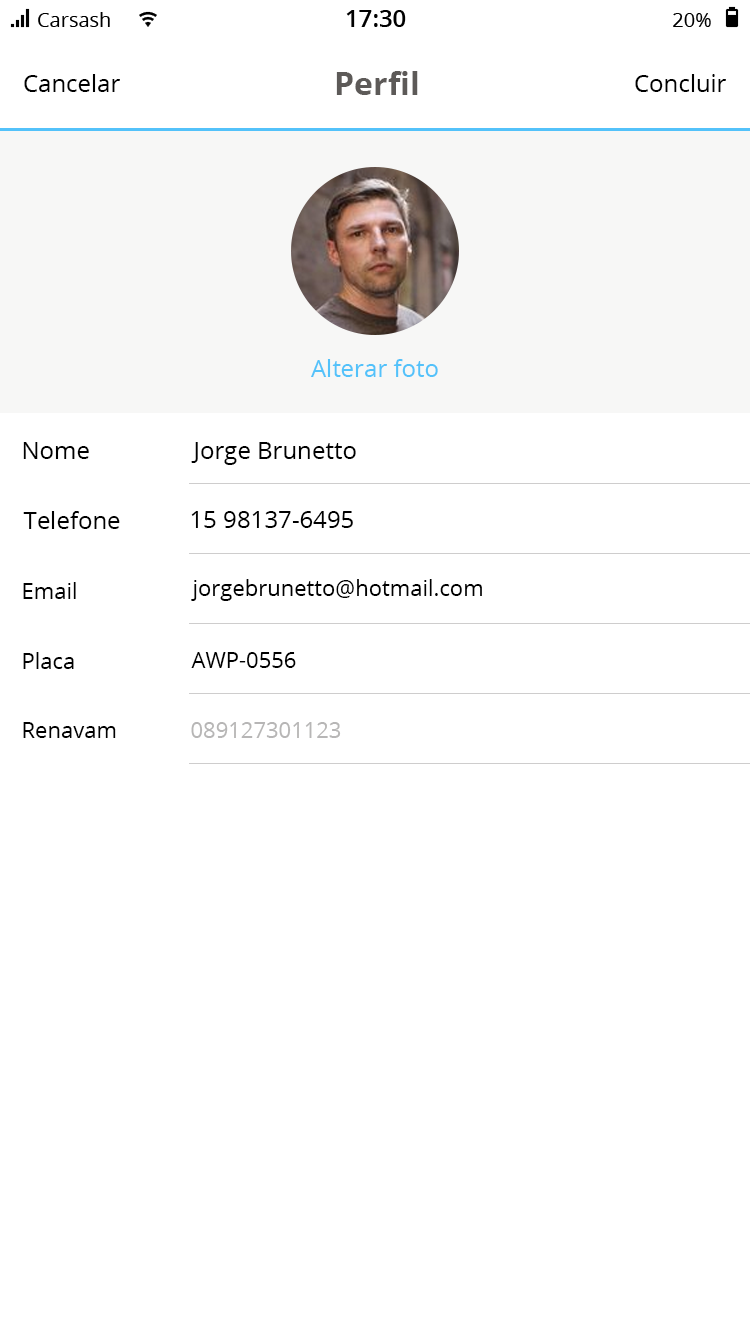
<style>
.page{position:relative;width:750px;height:1334px;background:#ffffff}
.page>*{position:absolute;margin:0}
.t1{font:24px "OpenSans";color:#000000}
.t2{font:32px "OpenSans-Bold";color:#5d5a58}
.t3{font:24px "OpenSans";color:#53c2fa}
.t4{font:22px "OpenSans";color:#000000}
.t5{font:22px "OpenSans";color:#b7b6b6}
</style>
<div class="page">
<p class="t1" style="left:24px;top:74px;width:96px;height:18px">Cancelar</p>
<p class="t2" style="left:336px;top:71px;width:82px;height:24px">Perfil</p>
<p class="t1" style="left:635px;top:74px;width:91px;height:18px">Concluir</p>
<p class="t3" style="left:311px;top:359px;width:127px;height:18px">Alterar foto</p>
<p class="t1" style="left:23px;top:442px;width:66px;height:17px">Nome</p>
<p class="t1" style="left:191px;top:442px;width:165px;height:23px">Jorge Brunetto</p>
<p class="t1" style="left:23px;top:511px;width:97px;height:18px">Telefone</p>
<p class="t1" style="left:191px;top:511px;width:162px;height:17px">15 98137-6495</p>
<p class="t4" style="left:23px;top:582px;width:53px;height:17px">Email</p>
<p class="t4" style="left:191px;top:579px;width:291px;height:22px">jorgebrunetto@hotmail.com</p>
<p class="t4" style="left:23px;top:652px;width:51px;height:17px">Placa</p>
<p class="t4" style="left:191px;top:652px;width:105px;height:16px">AWP-0556</p>
<p class="t4" style="left:23px;top:722px;width:93px;height:16px">Renavam</p>
<p class="t5" style="left:191px;top:722px;width:150px;height:16px">089127301123</p>
</div>
